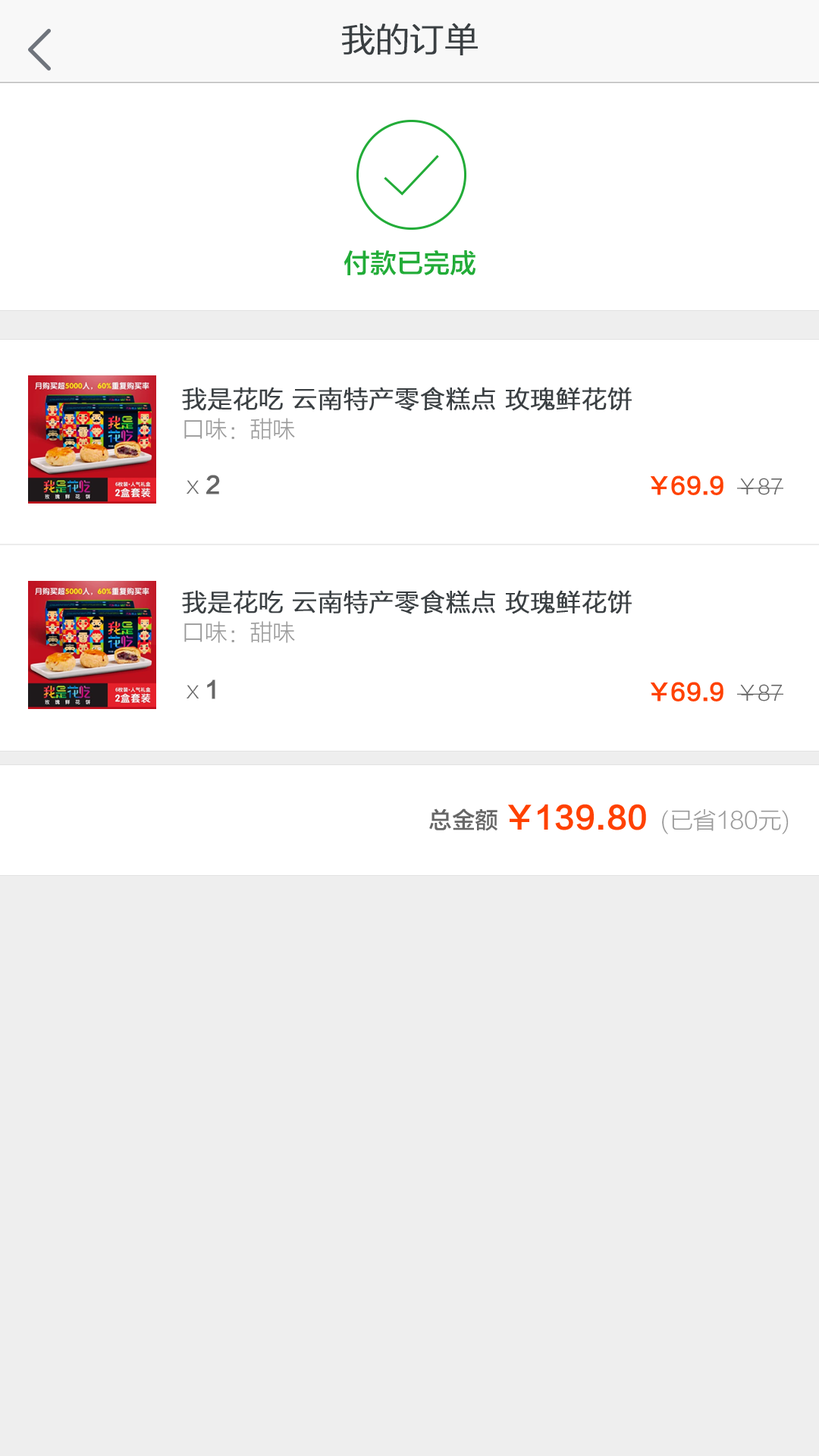
<style>
.page{position:relative;width:819px;height:1456px;background:#ffffff}
.page>*{position:absolute;margin:0}
.t1{font:33.4px "FZLTXHK--GBK1-0";color:#3a3f42;font-weight:bold}
.t2{font:26.6px "FZLTZHK--GBK1-0";color:#22ac38}
.t3{font:24.3px/30.7px "FZLTXHK--GBK1-0";color:#3a3f42;font-weight:bold}
.t4{font:22.7px/30.7px "FZLTXHK--GBK1-0";color:#999999}
.t5{font:23px "FZLTXHK--GBK1-0";color:#666666}
.t6{font:23px "FZLTZHK--GBK1-0";color:#666666}
.t7{font:23px "FZLTZHK--GBK1-0";color:#ff4100}
.t8{font:20.5px "FZLTXHK--GBK1-0";color:#666666}
.t9{font:23px "FZLTXHK--GBK1-0";color:#999999}
.t10{font:30.7px "FZLTZHK--GBK1-0";color:#ff4100}
</style>
<div class="page">
<p class="t1" style="left:342px;top:23px;width:136px;height:32px">我的订单</p>
<p class="t2" style="left:344px;top:250px;width:131px;height:25px">付款已完成</p>
<p class="t3" style="left:182px;top:387px;width:450px;height:53px">我是花吃 云南特产零食糕点 玫瑰鲜花饼<br><span class="t4">口味：甜味</span></p>
<p class="t5" style="left:187px;top:475px;width:33px;height:19px">x <span class="t6">2</span></p>
<p class="t7" style="left:650px;top:475px;width:133px;height:20px">￥69.9  <span class="t8">￥87</span></p>
<p class="t3" style="left:182px;top:590px;width:450px;height:53px">我是花吃 云南特产零食糕点 玫瑰鲜花饼<br><span class="t4">口味：甜味</span></p>
<p class="t5" style="left:187px;top:679px;width:28px;height:20px">x<span class="t6"> 1</span></p>
<p class="t7" style="left:650px;top:682px;width:133px;height:19px">￥69.9  <span class="t8">￥87</span></p>
<p class="t9" style="left:429px;top:804px;width:360px;height:30px"><span class="t6">总金额 </span><span class="t10">￥139.80  </span>(已省180元)</p>
</div>
